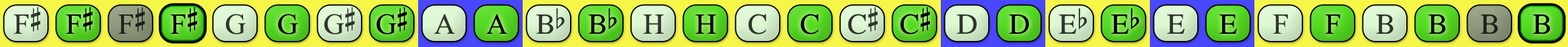
<style>
.page{position:relative;width:1568px;height:47px}
.page>*{position:absolute;margin:0}
.t1{font:29.2px "OpusChords";color:#30352d}
.t2{font:29.2px "OpusChords";color:#000000}
.t3{font:29.2px "OpusChords";color:#1f211b}
.t4{font:29.2px "OpusChords";color:#2f352d}
.t5{font:29.2px "OpusChords";letter-spacing:-0.025em;color:#2f352d}
.t6{font:29.2px "OpusChords";letter-spacing:-0.025em;color:#000000}
.t7{font:29.2px "OpusChords";color:#30362e}
</style>
<div class="page">
<p class="t1" style="left:13px;top:7px;width:28px;height:27px">F#</p>
<p class="t2" style="left:66px;top:7px;width:27px;height:27px">F#</p>
<p class="t3" style="left:118px;top:7px;width:27px;height:27px">F#</p>
<p class="t2" style="left:170px;top:7px;width:28px;height:27px">F#</p>
<p class="t4" style="left:225px;top:14px;width:21px;height:21px">G</p>
<p class="t2" style="left:278px;top:14px;width:20px;height:21px">G</p>
<p class="t5" style="left:324px;top:7px;width:31px;height:28px">G#</p>
<p class="t6" style="left:376px;top:7px;width:31px;height:28px">G#</p>
<p class="t4" style="left:434px;top:14px;width:21px;height:20px">A</p>
<p class="t2" style="left:486px;top:14px;width:21px;height:20px">A</p>
<p class="t1" style="left:536px;top:9px;width:29px;height:25px">Bb</p>
<p class="t2" style="left:588px;top:9px;width:29px;height:25px">Bb</p>
<p class="t1" style="left:643px;top:15px;width:21px;height:19px">H</p>
<p class="t2" style="left:695px;top:15px;width:21px;height:19px">H</p>
<p class="t7" style="left:748px;top:14px;width:18px;height:21px">C</p>
<p class="t2" style="left:800px;top:14px;width:19px;height:21px">C</p>
<p class="t4" style="left:848px;top:7px;width:30px;height:28px">C#</p>
<p class="t2" style="left:900px;top:7px;width:30px;height:28px">C#</p>
<p class="t4" style="left:957px;top:15px;width:20px;height:19px">D</p>
<p class="t2" style="left:1009px;top:15px;width:20px;height:19px">D</p>
<p class="t1" style="left:1059px;top:9px;width:28px;height:25px">Eb</p>
<p class="t2" style="left:1111px;top:9px;width:29px;height:25px">Eb</p>
<p class="t7" style="left:1167px;top:15px;width:18px;height:19px">E</p>
<p class="t2" style="left:1219px;top:15px;width:18px;height:19px">E</p>
<p class="t7" style="left:1273px;top:15px;width:15px;height:19px">F</p>
<p class="t2" style="left:1325px;top:15px;width:15px;height:19px">F</p>
<p class="t1" style="left:1376px;top:15px;width:18px;height:19px">B</p>
<p class="t2" style="left:1428px;top:15px;width:18px;height:19px">B</p>
<p class="t3" style="left:1480px;top:15px;width:18px;height:19px">B</p>
<p class="t2" style="left:1533px;top:15px;width:17px;height:19px">B</p>
</div>
